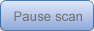
<style>
.page{position:relative;width:94px;height:31px}
.page>*{position:absolute;margin:0}
.t1{font:13.3px "ArialMT";color:#6e6e6e}
</style>
<div class="page">
<p class="t1" style="left:14px;top:11px;width:68px;height:10px">Pause scan</p>
</div>
